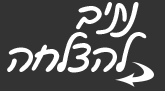
<style>
.page{position:relative;width:165px;height:91px;background:#333333}
.page>*{position:absolute;margin:0}
.t1{font:40px "GveretLevinAlefAlefAlef-Regular";color:#ffffff}
</style>
<div class="page">
<p class="t1" style="left:76px;top:2px;width:63px;height:36px">נתיב</p>
<p class="t1" style="left:7px;top:32px;width:140px;height:41px">להצלחה</p>
</div>
